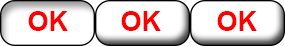
<style>
.page{position:relative;width:285px;height:46px;background:#ffffff}
.page>*{position:absolute;margin:0}
.t1{font:26.7px "Arial-BoldMT";color:#ff0000}
</style>
<div class="page">
<p class="t1" style="left:28px;top:11px;width:40px;height:20px">OK</p>
<p class="t1" style="left:121px;top:11px;width:40px;height:20px">OK</p>
<p class="t1" style="left:217px;top:11px;width:40px;height:20px">OK</p>
</div>
